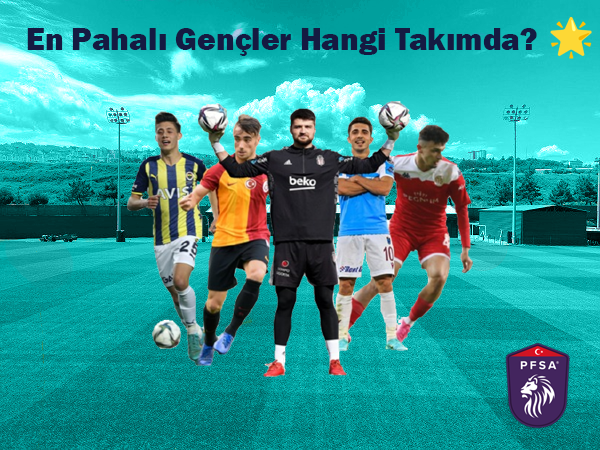
<style>
.page{position:relative;width:600px;height:450px}
.page>*{position:absolute;margin:0}
.t1{font:32px "FranklinGothic-Heavy";color:#151a42}
.t2{font:24px "Rockwell-ExtraBold";color:#000000}
</style>
<div class="page">
<p class="t1" style="left:27px;top:28px;width:510px;height:28px"><span class="t2">    </span>En Pahalı Gençler Hangi Takımda?</p>
</div>
